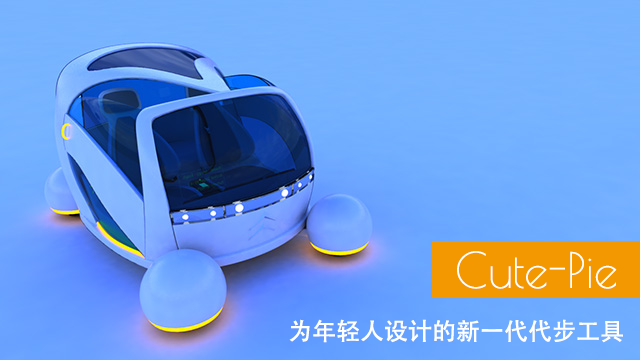
<style>
.page{position:relative;width:640px;height:360px}
.page>*{position:absolute;margin:0}
.t1{font:48px "PoiretOne-Regular";color:#ffffff}
.t2{font:24px "AdobeHeitiStd-Regular";color:#ffffff}
</style>
<div class="page">
<p class="t1" style="left:457px;top:251px;width:160px;height:38px">Cute-Pie</p>
<p class="t2" style="left:289px;top:319px;width:334px;height:24px">为年轻人设计的新一代代步工具</p>
</div>
